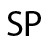
<style>
.page{position:relative;width:48px;height:48px;background:#ffffff}
.page>*{position:absolute;margin:0}
.t1{font:36px "MyriadPro-Regular";color:#000000}
</style>
<div class="page">
<p class="t1" style="left:7px;top:11px;width:34px;height:25px">SP</p>
</div>
